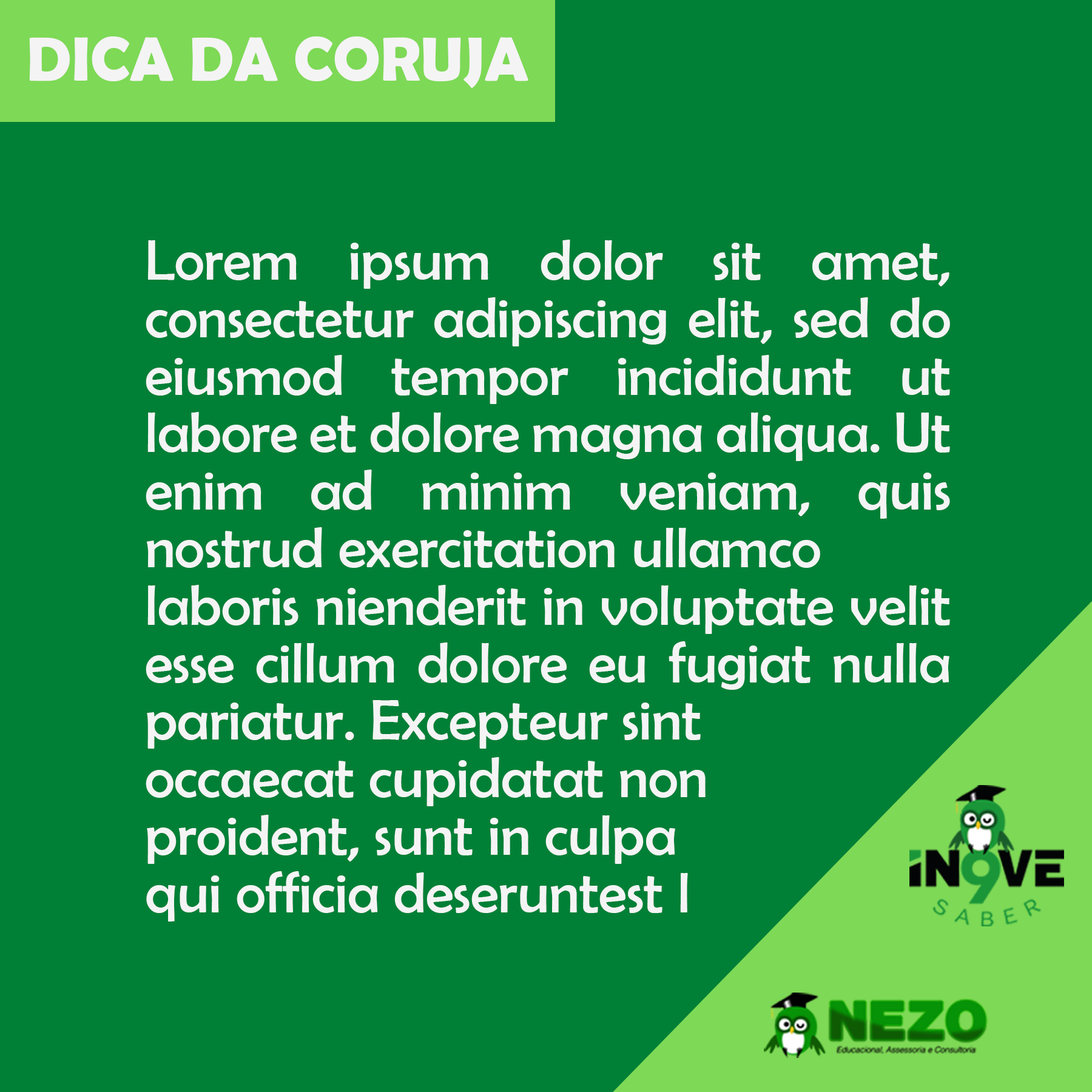
<style>
.page{position:relative;width:1092px;height:1092px;background:#008036}
.page>*{position:absolute;margin:0}
.t1{font:63.1px "BerlinSansFBDemi-Bold";color:#f4f4f4}
.t2{font:57.5px/57.5px "BerlinSansFB-Reg";color:#f4f4f4}
</style>
<div class="page">
<p class="t1" style="left:29px;top:36px;width:499px;height:52px">DICA DA CORUJA</p>
<p class="t2" style="left:146px;top:240px;width:804px;height:682px;text-align:justify">Lorem ipsum dolor sit amet, consectetur adipiscing elit, sed do eiusmod tempor incididunt ut labore et dolore magna aliqua. Ut enim ad minim veniam, quis nostrud exercitation ullamco <br>laboris nienderit in voluptate velit esse cillum dolore eu fugiat nulla pariatur. Excepteur sint <br>occaecat cupidatat non <br>proident, sunt in culpa <br>qui officia deseruntest l</p>
</div>
